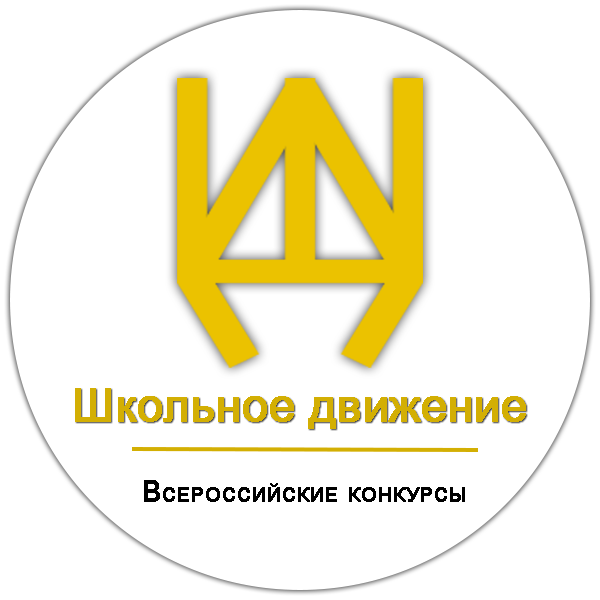
<style>
.page{position:relative;width:600px;height:600px;background:#ffffff}
.page>*{position:absolute;margin:0}
.t1{font:45.6px "ArialUnicodeMS";color:#d3af03;font-weight:bold}
.t2{font:28.9px "ArialUnicodeMS";color:#000000;font-variant:small-caps;font-weight:bold}
</style>
<div class="page">
<p class="t1" style="left:75px;top:388px;width:451px;height:41px">Школьное движение</p>
<p class="t2" style="left:144px;top:480px;width:321px;height:22px">Всероссийские конкурсы</p>
</div>
